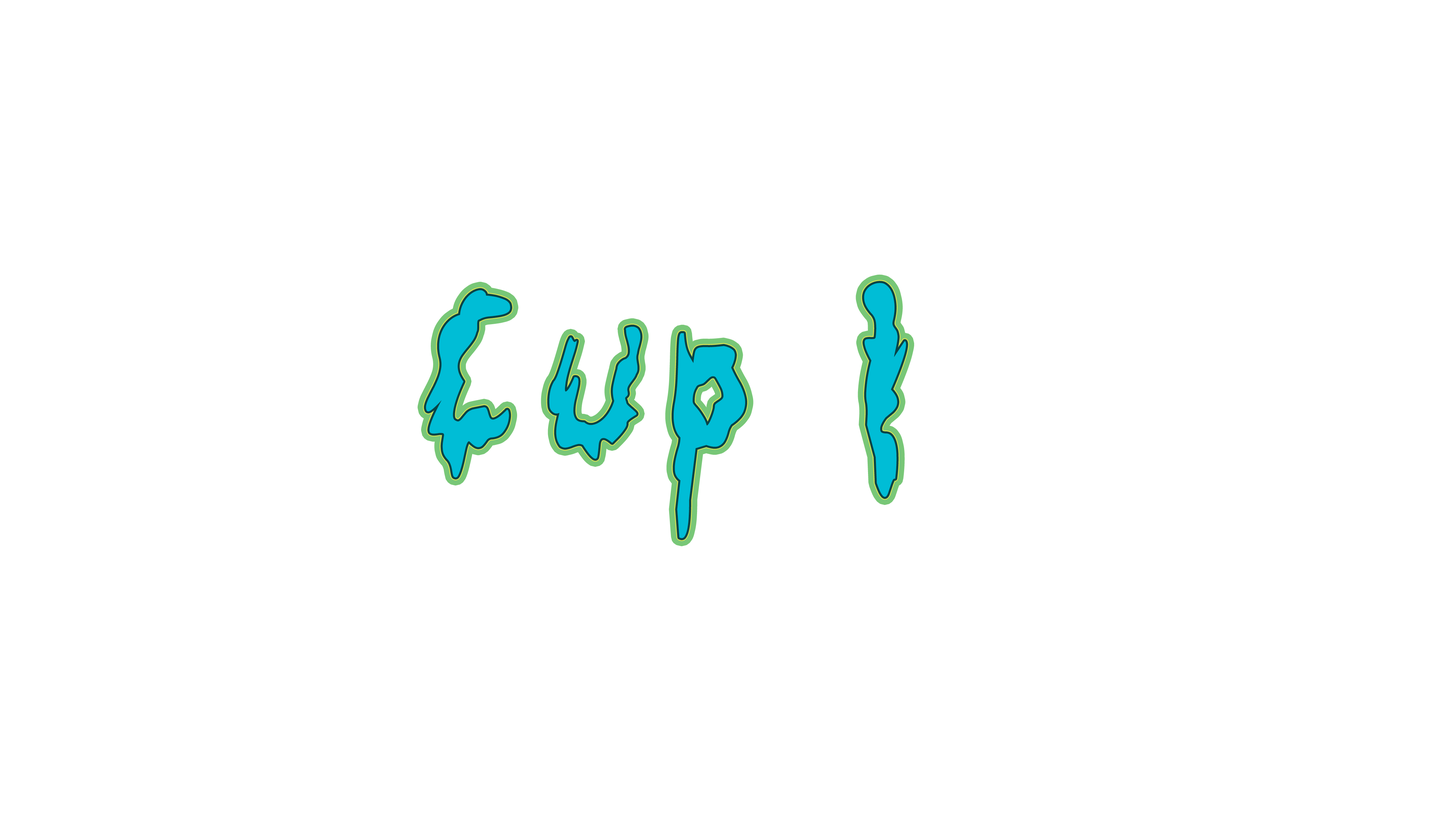
<style>
.page{position:relative;width:1445px;height:825px;background:#ffffff}
.page>*{position:absolute;margin:0}
.t1{font:215px "GetSchwifty-Regular";letter-spacing:0.08em;color:#00bdd6}
</style>
<div class="page">
<p class="t1" style="left:425px;top:283px;width:481px;height:255px">Cup 1</p>
<p class="t1" style="left:426px;top:283px;width:480px;height:256px">Cup 1</p>
<p class="t1" style="left:426px;top:283px;width:480px;height:256px">Cup 1</p>
</div>
